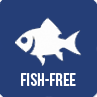
<style>
.page{position:relative;width:97px;height:97px;background:#253e77}
.page>*{position:absolute;margin:0}
.t1{font:18px "BebasNeue";color:#ffffff}
</style>
<div class="page">
<p class="t1" style="left:21px;top:73px;width:55px;height:13px">fish-free</p>
</div>
